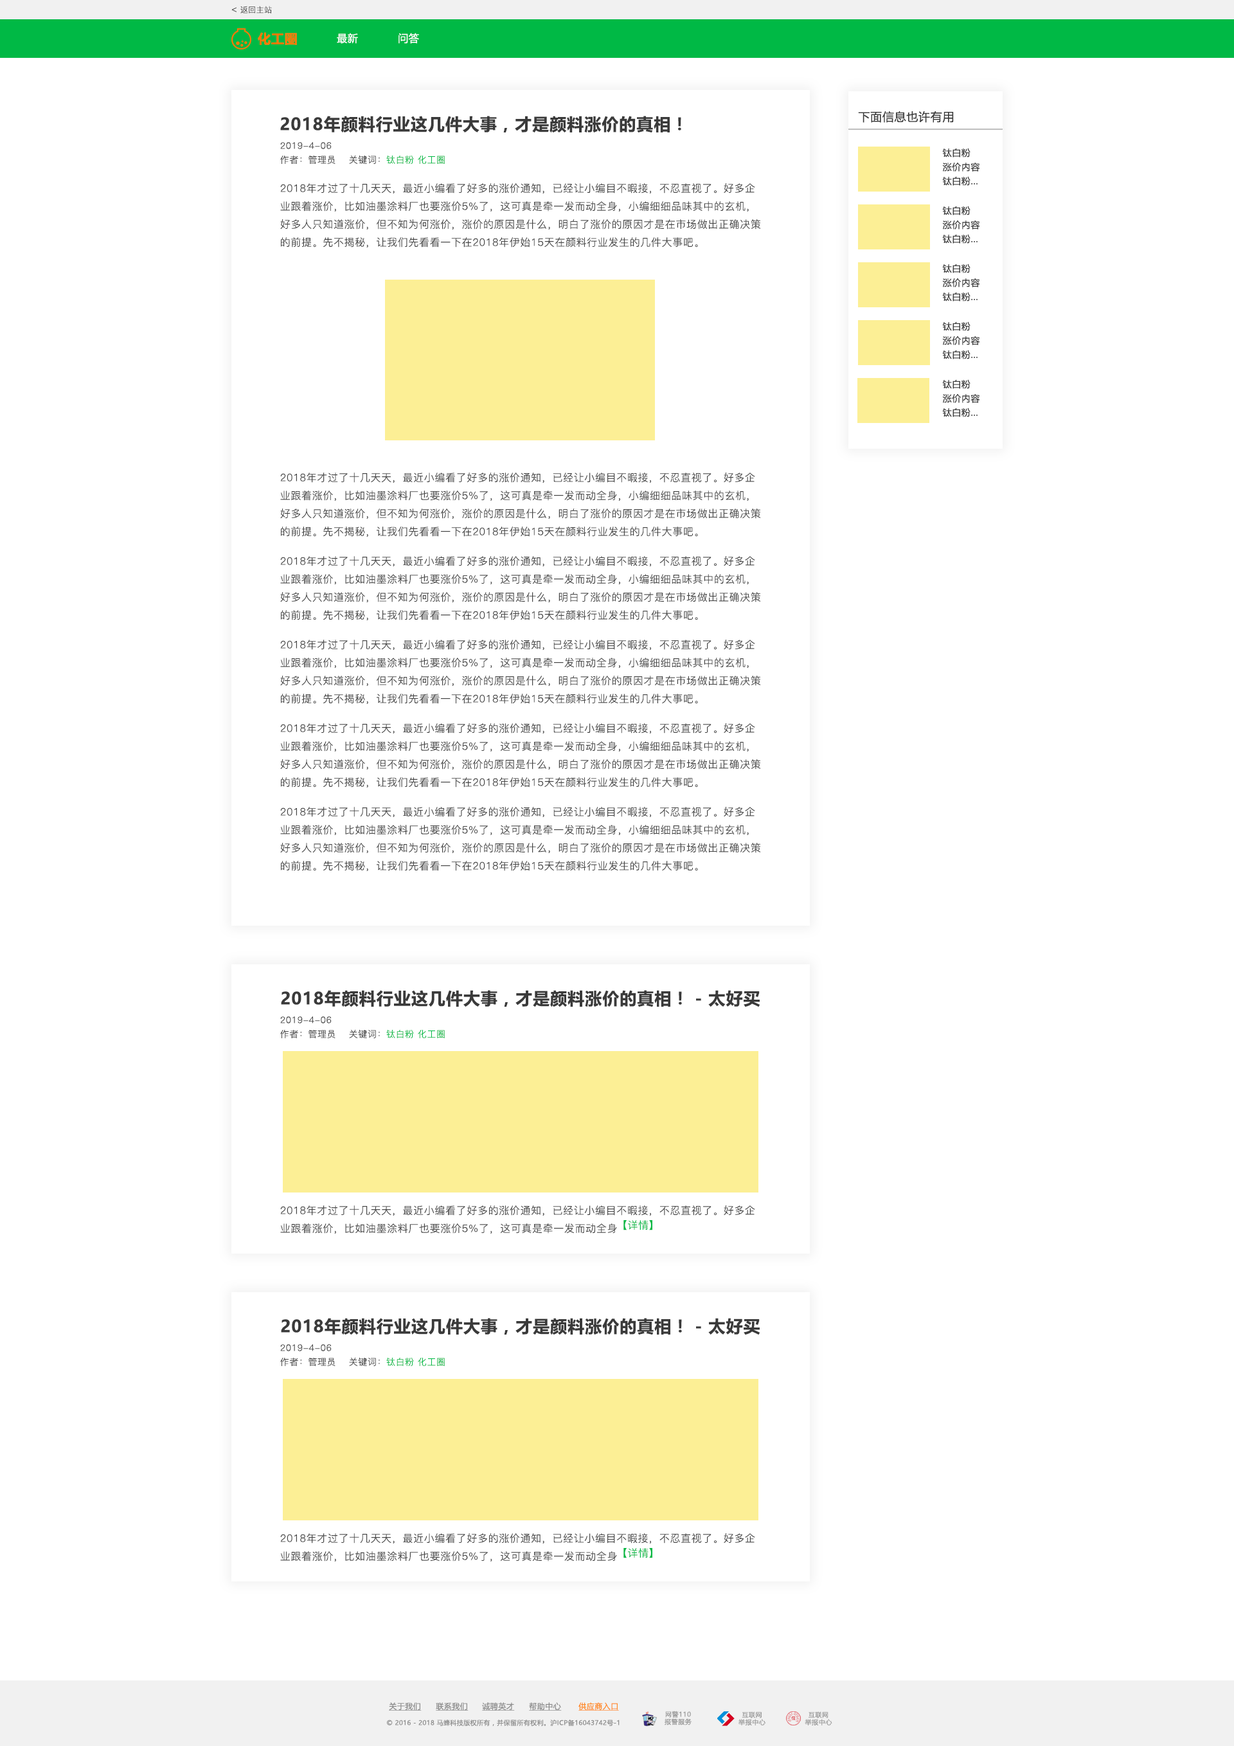
<style>
.page{position:relative;width:1234px;height:1746px;background:#ffffff}
.page>*{position:absolute;margin:0}
.t1{font:7.7px "PingFang-SC-Regular";letter-spacing:0.04em;color:#444444}
.t2{font:9px "PingFang-SC-Regular";letter-spacing:0.04em;color:#444444}
.t3{font:12.9px "MicrosoftYaHei-Bold";letter-spacing:0.04em;color:#f97a08}
.t4{font:10.3px "MicrosoftYaHei";letter-spacing:0.04em;color:#ffffff}
.t5{font:11.6px "MicrosoftYaHei";letter-spacing:0.04em;color:#3a3a3a}
.t6{font:16.7px "MicrosoftYaHei-Bold";letter-spacing:0.04em;color:#3a3a3a}
.t7{font:9px/14.1px "MicrosoftYaHei";letter-spacing:0.04em;color:#3a3a3a}
.t8{font:9px "PingFang-SC-Regular";letter-spacing:0.04em;color:#00b945}
.t9{font:10.3px "PingFang-SC-Regular";letter-spacing:0.04em;color:#444444}
.t10{font:10.3px "PingFang-SC-Regular";letter-spacing:0.04em;color:#00b945}
.t11{font:7.7px "MicrosoftYaHeiUI";letter-spacing:0.04em;color:#8c8c8c;text-decoration:underline}
.t12{font:7.7px "MicrosoftYaHeiUI";letter-spacing:0.04em;color:#ff8b25;text-decoration:underline}
.t13{font:6.4px "MicrosoftYaHeiUI";letter-spacing:0.04em;color:#8c8c8c}
.t14{font:6.4px/7.5px "MicrosoftYaHei";letter-spacing:0.06em;color:#999999}
</style>
<div class="page">
<p class="t1" style="left:240px;top:6px;width:32px;height:8px">返回主站</p>
<p class="t2" style="left:231px;top:7px;width:6px;height:5px">&lt;</p>
<p class="t3" style="left:258px;top:32px;width:39px;height:13px">化工圈</p>
<p class="t4" style="left:337px;top:33px;width:21px;height:11px">最新</p>
<p class="t4" style="left:399px;top:33px;width:20px;height:11px">问答</p>
<p class="t5" style="left:858px;top:111px;width:96px;height:12px">下面信息也许有用</p>
<p class="t6" style="left:280px;top:116px;width:401px;height:17px">2018年颜料行业这几件大事，才是颜料涨价的真相！</p>
<p class="t2" style="left:280px;top:142px;width:52px;height:7px">2019-4-06</p>
<p class="t7" style="left:942px;top:148px;width:38px;height:38px">钛白粉<br>涨价内容<br>钛白粉...</p>
<p class="t2" style="left:280px;top:155px;width:56px;height:9px">作者：管理员</p>
<p class="t8" style="left:349px;top:155px;width:96px;height:9px"><span class="t2">关键词：</span>钛白粉 化工圈</p>
<p class="t9" style="left:280px;top:183px;width:481px;height:65px">2018年才过了十几天天，最近小编看了好多的涨价通知，已经让小编目不暇接，不忍直视了。好多企<br>业跟着涨价，比如油墨涂料厂也要涨价5%了，这可真是牵一发而动全身，小编细细品味其中的玄机，<br>好多人只知道涨价，但不知为何涨价，涨价的原因是什么，明白了涨价的原因才是在市场做出正确决策<br>的前提。先不揭秘，让我们先看看一下在2018年伊始15天在颜料行业发生的几件大事吧。</p>
<p class="t7" style="left:942px;top:206px;width:38px;height:38px">钛白粉<br>涨价内容<br>钛白粉...</p>
<p class="t7" style="left:942px;top:264px;width:38px;height:38px">钛白粉<br>涨价内容<br>钛白粉...</p>
<p class="t7" style="left:942px;top:321px;width:38px;height:38px">钛白粉<br>涨价内容<br>钛白粉...</p>
<p class="t7" style="left:942px;top:379px;width:38px;height:38px">钛白粉<br>涨价内容<br>钛白粉...</p>
<p class="t9" style="left:280px;top:473px;width:481px;height:64px">2018年才过了十几天天，最近小编看了好多的涨价通知，已经让小编目不暇接，不忍直视了。好多企<br>业跟着涨价，比如油墨涂料厂也要涨价5%了，这可真是牵一发而动全身，小编细细品味其中的玄机，<br>好多人只知道涨价，但不知为何涨价，涨价的原因是什么，明白了涨价的原因才是在市场做出正确决策<br>的前提。先不揭秘，让我们先看看一下在2018年伊始15天在颜料行业发生的几件大事吧。</p>
<p class="t9" style="left:280px;top:556px;width:481px;height:64px">2018年才过了十几天天，最近小编看了好多的涨价通知，已经让小编目不暇接，不忍直视了。好多企<br>业跟着涨价，比如油墨涂料厂也要涨价5%了，这可真是牵一发而动全身，小编细细品味其中的玄机，<br>好多人只知道涨价，但不知为何涨价，涨价的原因是什么，明白了涨价的原因才是在市场做出正确决策<br>的前提。先不揭秘，让我们先看看一下在2018年伊始15天在颜料行业发生的几件大事吧。</p>
<p class="t9" style="left:280px;top:640px;width:481px;height:64px">2018年才过了十几天天，最近小编看了好多的涨价通知，已经让小编目不暇接，不忍直视了。好多企<br>业跟着涨价，比如油墨涂料厂也要涨价5%了，这可真是牵一发而动全身，小编细细品味其中的玄机，<br>好多人只知道涨价，但不知为何涨价，涨价的原因是什么，明白了涨价的原因才是在市场做出正确决策<br>的前提。先不揭秘，让我们先看看一下在2018年伊始15天在颜料行业发生的几件大事吧。</p>
<p class="t9" style="left:280px;top:723px;width:481px;height:65px">2018年才过了十几天天，最近小编看了好多的涨价通知，已经让小编目不暇接，不忍直视了。好多企<br>业跟着涨价，比如油墨涂料厂也要涨价5%了，这可真是牵一发而动全身，小编细细品味其中的玄机，<br>好多人只知道涨价，但不知为何涨价，涨价的原因是什么，明白了涨价的原因才是在市场做出正确决策<br>的前提。先不揭秘，让我们先看看一下在2018年伊始15天在颜料行业发生的几件大事吧。</p>
<p class="t9" style="left:280px;top:807px;width:481px;height:64px">2018年才过了十几天天，最近小编看了好多的涨价通知，已经让小编目不暇接，不忍直视了。好多企<br>业跟着涨价，比如油墨涂料厂也要涨价5%了，这可真是牵一发而动全身，小编细细品味其中的玄机，<br>好多人只知道涨价，但不知为何涨价，涨价的原因是什么，明白了涨价的原因才是在市场做出正确决策<br>的前提。先不揭秘，让我们先看看一下在2018年伊始15天在颜料行业发生的几件大事吧。</p>
<p class="t6" style="left:281px;top:990px;width:479px;height:17px">2018年颜料行业这几件大事，才是颜料涨价的真相！ - 太好买</p>
<p class="t2" style="left:280px;top:1016px;width:52px;height:7px">2019-4-06</p>
<p class="t2" style="left:280px;top:1029px;width:56px;height:9px">作者：管理员</p>
<p class="t8" style="left:349px;top:1029px;width:96px;height:9px"><span class="t2">关键词：</span>钛白粉 化工圈</p>
<p class="t9" style="left:280px;top:1205px;width:475px;height:29px">2018年才过了十几天天，最近小编看了好多的涨价通知，已经让小编目不暇接，不忍直视了。好多企<br>业跟着涨价，比如油墨涂料厂也要涨价5%了，这可真是牵一发而动全身</p>
<p class="t10" style="left:624px;top:1220px;width:28px;height:10px">【详情】</p>
<p class="t6" style="left:281px;top:1318px;width:479px;height:17px">2018年颜料行业这几件大事，才是颜料涨价的真相！ - 太好买</p>
<p class="t2" style="left:280px;top:1344px;width:52px;height:7px">2019-4-06</p>
<p class="t2" style="left:280px;top:1357px;width:56px;height:9px">作者：管理员</p>
<p class="t8" style="left:349px;top:1357px;width:96px;height:9px"><span class="t2">关键词：</span>钛白粉 化工圈</p>
<p class="t9" style="left:280px;top:1533px;width:475px;height:29px">2018年才过了十几天天，最近小编看了好多的涨价通知，已经让小编目不暇接，不忍直视了。好多企<br>业跟着涨价，比如油墨涂料厂也要涨价5%了，这可真是牵一发而动全身</p>
<p class="t10" style="left:624px;top:1548px;width:28px;height:10px">【详情】</p>
<p class="t11" style="left:389px;top:1702px;width:33px;height:9px">关于我们</p>
<p class="t11" style="left:436px;top:1702px;width:33px;height:9px">联系我们</p>
<p class="t11" style="left:482px;top:1702px;width:33px;height:9px">诚聘英才</p>
<p class="t11" style="left:529px;top:1702px;width:33px;height:9px">帮助中心</p>
<p class="t12" style="left:579px;top:1702px;width:40px;height:9px">供应商入口</p>
<p class="t13" style="left:387px;top:1719px;width:233px;height:7px">© 2016 - 2018 马蜂科技版权所有，并保留所有权利。沪ICP备16043742号-1</p>
<p class="t14" style="left:665px;top:1711px;width:27px;height:14px;text-align:center">网警110<br>报警服务</p>
<p class="t14" style="left:739px;top:1711px;width:27px;height:14px;text-align:center">互联网<br>举报中心</p>
<p class="t14" style="left:805px;top:1711px;width:28px;height:14px;text-align:center">互联网<br>举报中心</p>
</div>
